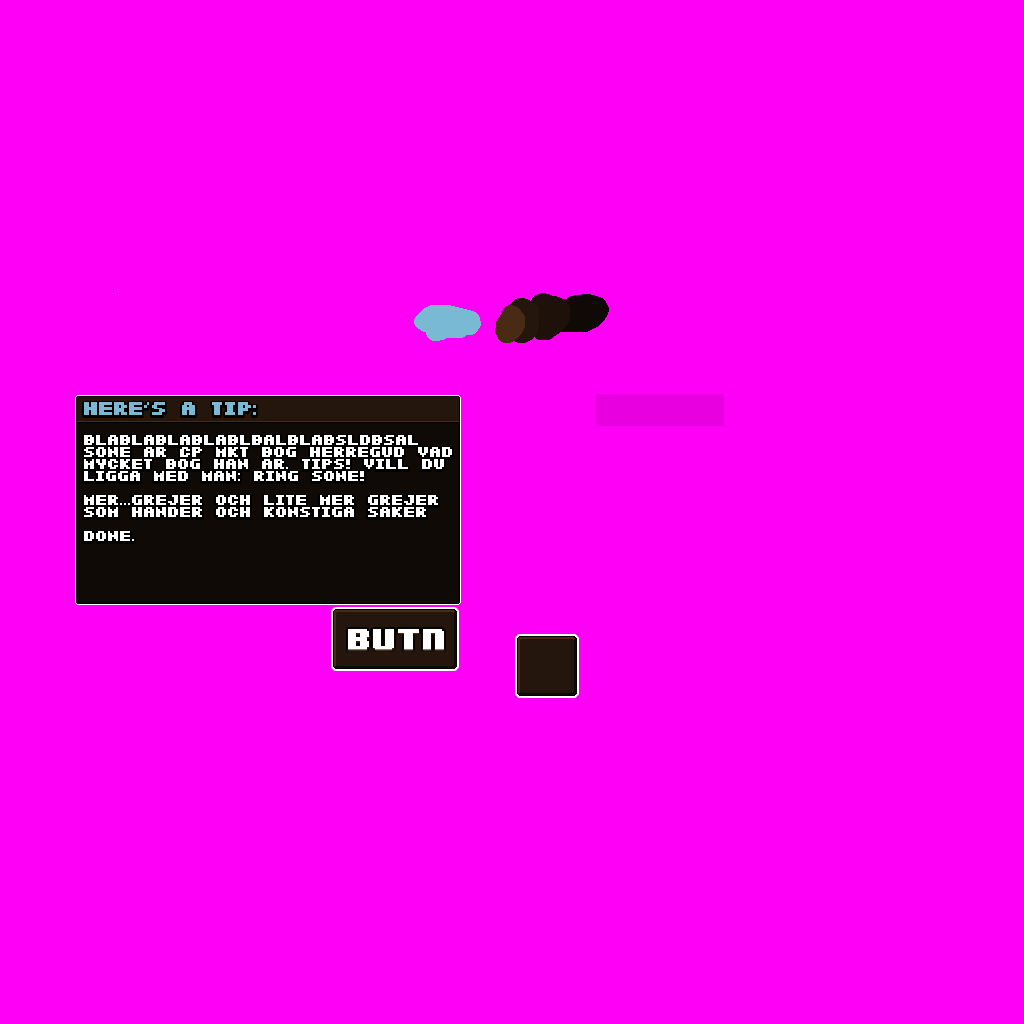
<style>
.page{position:relative;width:1024px;height:1024px;background:#ff00f6}
.page>*{position:absolute;margin:0}
.t1{font:20px "SFIntermosaicB-Bold";color:#79b9d4}
.t2{font:16px/12px "SFIntermosaicB-Bold";color:#ffffff}
.t3{font:25px "8BITWONDERNominal";color:#ffffff}
</style>
<div class="page">
<p class="t1" style="left:84px;top:402px;width:172px;height:13px">HERE’S A TIP:</p>
<p class="t2" style="left:84px;top:435px;width:368px;height:106px">BLABLABLABLABLBALBLABSLDBSAL<br>SONE ÄR CP MKT BÖG HERREGUD VAD<br>MYCKET BÖG HAN ÄR. TIPS! VILL DU<br>LIGGA MED MÄN: RING SONE!<br><br>MER...GREJER och lite mer grejer<br>som händer och konstiga saker<br><br>done.</p>
<p class="t3" style="left:348px;top:629px;width:96px;height:21px">BUTN</p>
</div>
